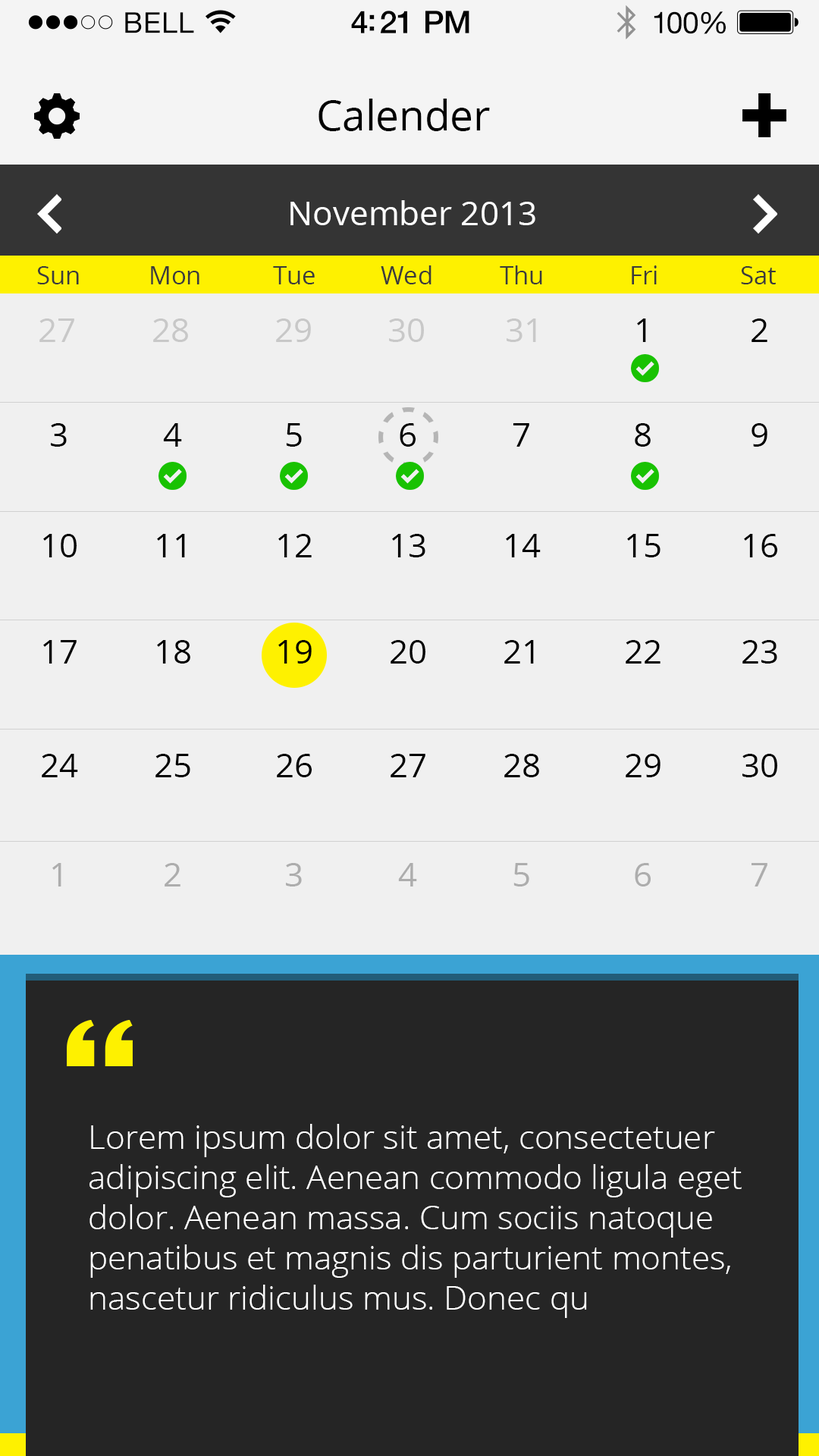
<style>
.page{position:relative;width:819px;height:1456px;background:#f0f0f0}
.page>*{position:absolute;margin:0}
.t1{font:28.7px "HelveticaNeue";letter-spacing:0.02em;color:#000000}
.t2{font:31.2px "HelveticaNeue-Medium";letter-spacing:-0.02em;color:#000000}
.t3{font:30px "HelveticaNeue";letter-spacing:-0.02em;color:#010101}
.t4{font:41.6px "OpenSans";color:#000000}
.t5{font:33.4px "OpenSans";color:#ffffff}
.t6{font:24.8px "OpenSans";color:#3b3b3b}
.t7{font:33.4px "OpenSans";color:#c8c8c8}
.t8{font:33.4px "OpenSans";color:#000000}
.t9{font:33.4px "OpenSans";color:#adadad}
.t10{font:33.4px "OpenSans-Light";color:#ffffff}
</style>
<div class="page">
<p class="t1" style="left:125px;top:12px;width:69px;height:21px">BELL</p>
<p class="t2" style="left:351px;top:11px;width:118px;height:22px">4:21 PM</p>
<p class="t3" style="left:654px;top:11px;width:72px;height:23px">100%</p>
<p class="t4" style="left:318px;top:99px;width:172px;height:32px">Calender</p>
<p class="t5" style="left:290px;top:200px;width:245px;height:25px">November 2013</p>
<p class="t6" style="left:37px;top:266px;width:42px;height:18px">Sun</p>
<p class="t6" style="left:151px;top:266px;width:48px;height:18px">Mon</p>
<p class="t6" style="left:273px;top:266px;width:42px;height:18px">Tue</p>
<p class="t6" style="left:381px;top:265px;width:50px;height:19px">Wed</p>
<p class="t6" style="left:500px;top:265px;width:42px;height:19px">Thu</p>
<p class="t6" style="left:632px;top:265px;width:25px;height:19px">Fri</p>
<p class="t6" style="left:741px;top:266px;width:35px;height:18px">Sat</p>
<p class="t7" style="left:39px;top:318px;width:35px;height:24px">27</p>
<p class="t7" style="left:153px;top:318px;width:35px;height:24px">28</p>
<p class="t7" style="left:276px;top:318px;width:35px;height:24px">29</p>
<p class="t7" style="left:389px;top:318px;width:35px;height:24px">30</p>
<p class="t7" style="left:507px;top:318px;width:29px;height:24px">31</p>
<p class="t8" style="left:637px;top:318px;width:9px;height:24px">1</p>
<p class="t8" style="left:751px;top:318px;width:16px;height:24px">2</p>
<p class="t8" style="left:51px;top:423px;width:16px;height:24px">3</p>
<p class="t8" style="left:163px;top:423px;width:19px;height:24px">4</p>
<p class="t8" style="left:286px;top:423px;width:16px;height:24px">5</p>
<p class="t8" style="left:400px;top:423px;width:16px;height:24px">6</p>
<p class="t8" style="left:513px;top:423px;width:16px;height:24px">7</p>
<p class="t8" style="left:635px;top:423px;width:16px;height:24px">8</p>
<p class="t8" style="left:751px;top:423px;width:16px;height:24px">9</p>
<p class="t8" style="left:43px;top:534px;width:34px;height:23px">10</p>
<p class="t8" style="left:157px;top:534px;width:28px;height:23px">11</p>
<p class="t8" style="left:278px;top:534px;width:34px;height:23px">12</p>
<p class="t8" style="left:392px;top:534px;width:33px;height:23px">13</p>
<p class="t8" style="left:506px;top:534px;width:35px;height:23px">14</p>
<p class="t8" style="left:627px;top:534px;width:33px;height:23px">15</p>
<p class="t8" style="left:744px;top:534px;width:33px;height:23px">16</p>
<p class="t8" style="left:43px;top:640px;width:34px;height:24px">17</p>
<p class="t8" style="left:157px;top:640px;width:33px;height:24px">18</p>
<p class="t8" style="left:278px;top:640px;width:34px;height:24px">19</p>
<p class="t8" style="left:391px;top:640px;width:34px;height:24px">20</p>
<p class="t8" style="left:504px;top:640px;width:30px;height:24px">21</p>
<p class="t8" style="left:626px;top:640px;width:34px;height:24px">22</p>
<p class="t8" style="left:742px;top:640px;width:35px;height:24px">23</p>
<p class="t8" style="left:42px;top:754px;width:36px;height:23px">24</p>
<p class="t8" style="left:155px;top:754px;width:35px;height:23px">25</p>
<p class="t8" style="left:277px;top:754px;width:35px;height:23px">26</p>
<p class="t8" style="left:391px;top:754px;width:34px;height:23px">27</p>
<p class="t8" style="left:504px;top:754px;width:35px;height:23px">28</p>
<p class="t8" style="left:626px;top:754px;width:34px;height:23px">29</p>
<p class="t8" style="left:742px;top:754px;width:35px;height:23px">30</p>
<p class="t9" style="left:52px;top:863px;width:9px;height:23px">1</p>
<p class="t9" style="left:165px;top:863px;width:15px;height:23px">2</p>
<p class="t9" style="left:286px;top:863px;width:16px;height:23px">3</p>
<p class="t9" style="left:398px;top:863px;width:19px;height:23px">4</p>
<p class="t9" style="left:513px;top:863px;width:16px;height:23px">5</p>
<p class="t9" style="left:635px;top:863px;width:16px;height:23px">6</p>
<p class="t9" style="left:751px;top:863px;width:16px;height:23px">7</p>
<p class="t10" style="left:89px;top:1124px;width:653px;height:194px">Lorem ipsum dolor sit amet, consectetuer adipiscing elit. Aenean commodo ligula eget dolor. Aenean massa. Cum sociis natoque penatibus et magnis dis parturient montes, nascetur ridiculus mus. Donec qu</p>
</div>
